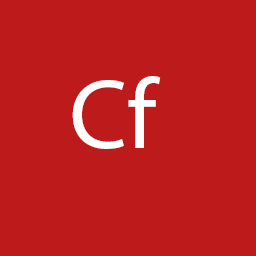
<style>
.page{position:relative;width:256px;height:256px;background:#bd1b1b}
.page>*{position:absolute;margin:0}
.t1{font:100px "MyriadPro-Regular";color:#ffffff}
</style>
<div class="page">
<p class="t1" style="left:72px;top:76px;width:89px;height:73px">Cf</p>
</div>
